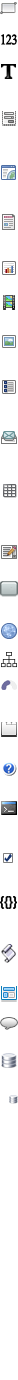
<style>
.page{position:relative;width:18px;height:1380px;background:#ffffff}
.page>*{position:absolute;margin:0}
.t1{font:14.4px "TimesNewRomanPSMT";letter-spacing:-0.05em;color:#000000;font-weight:bold;scale:0.83 1}
</style>
<div class="page">
<p class="t1" style="left:1px;top:34px;width:16px;height:11px">123</p>
</div>
